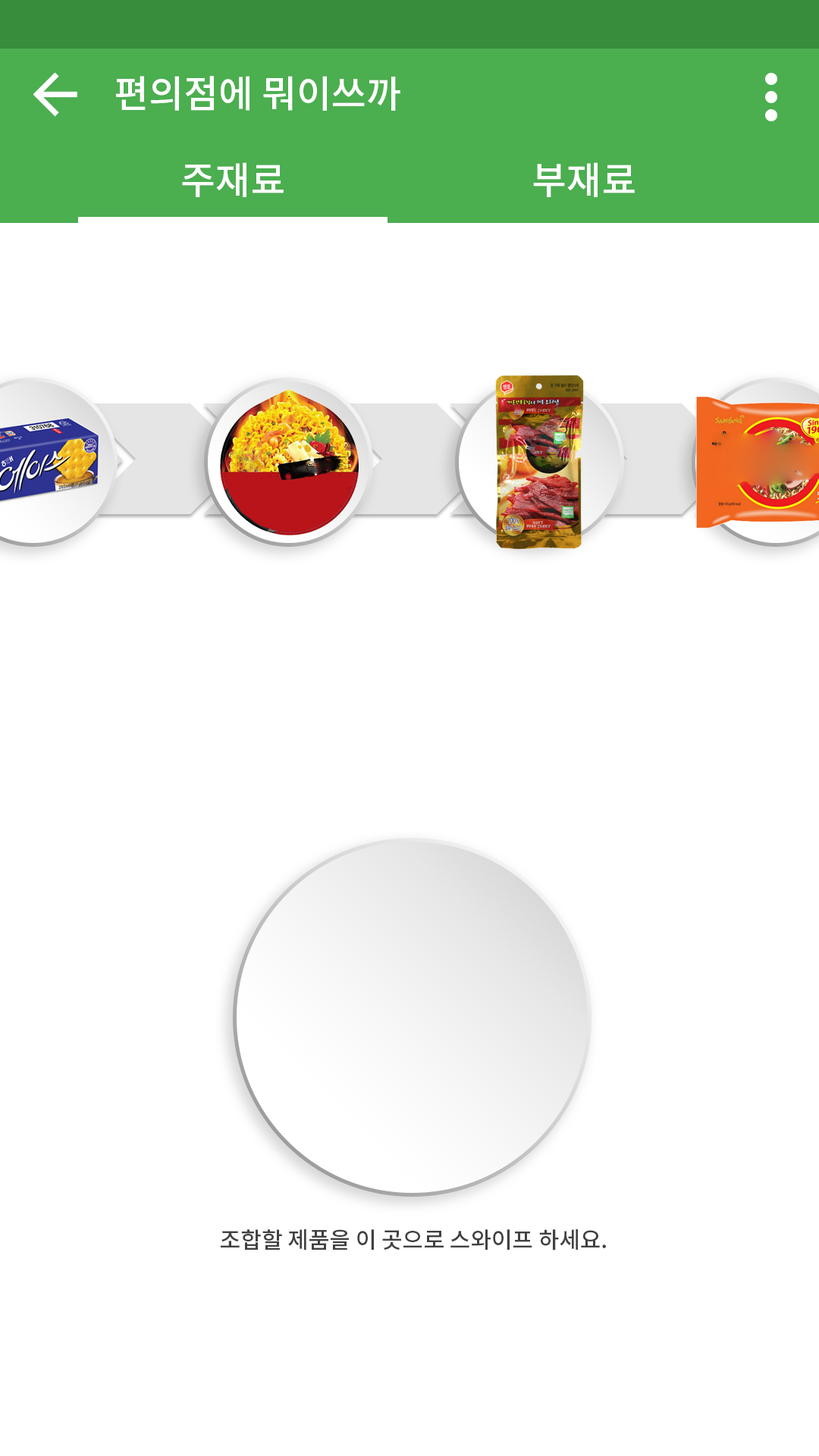
<style>
.page{position:relative;width:819px;height:1456px;background:#ffffff}
.page>*{position:absolute;margin:0}
.t1{font:37.9px "NotoSansCJKkr-Medium";color:#ffffff}
.t2{font:22.7px "NotoSansCJKkr-Medium";color:#414141}
</style>
<div class="page">
<p class="t1" style="left:115px;top:76px;width:285px;height:35px">편의점에 뭐이쓰까</p>
<p class="t1" style="left:182px;top:162px;width:102px;height:35px">주재료</p>
<p class="t1" style="left:533px;top:162px;width:102px;height:35px">부재료</p>
<p class="t2" style="left:221px;top:1229px;width:385px;height:21px">조합할 제품을 이 곳으로 스와이프 하세요.</p>
</div>
